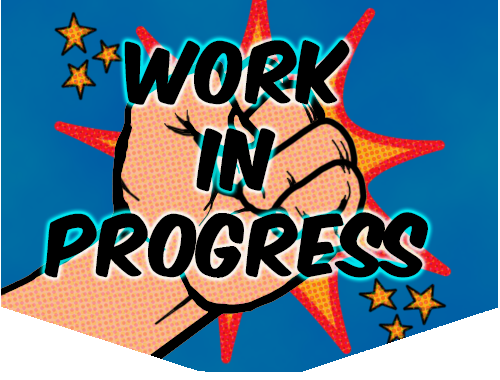
<style>
.page{position:relative;width:500px;height:380px}
.page>*{position:absolute;margin:0}
.t1{font:72px "KomikaAxis";color:#000000}
</style>
<div class="page">
<p class="t1" style="left:44px;top:40px;width:384px;height:238px;text-align:center">WORK<br>IN<br>PROGRESS</p>
</div>
